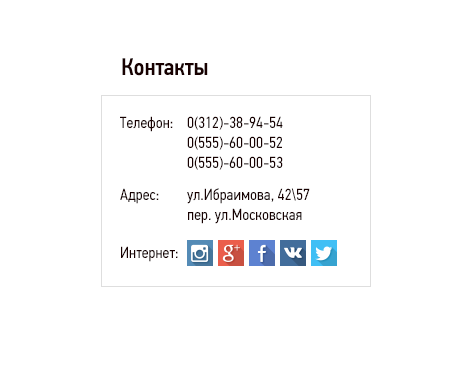
<style>
.page{position:relative;width:469px;height:375px;background:#ffffff}
.page>*{position:absolute;margin:0}
.t1{font:24px "PFDinTextCondPro-Medium";color:#180101}
.t2{font:16px "PFDinTextCondPro-Regular";color:#180101}
.t3{font:16px/20px "PFDinTextCondPro-Regular";color:#180101}
</style>
<div class="page">
<p class="t1" style="left:122px;top:58px;width:86px;height:18px">Контакты</p>
<p class="t2" style="left:120px;top:116px;width:53px;height:16px">Телефон:</p>
<p class="t3" style="left:187px;top:116px;width:96px;height:54px">0(312)-38-94-54<br>0(555)-60-00-52<br>0(555)-60-00-53</p>
<p class="t2" style="left:120px;top:188px;width:39px;height:16px">Адрес:</p>
<p class="t3" style="left:187px;top:188px;width:123px;height:36px">ул.Ибраимова, 42\57<br>пер. ул.Московская</p>
<p class="t2" style="left:121px;top:246px;width:57px;height:16px">Интернет:</p>
</div>
